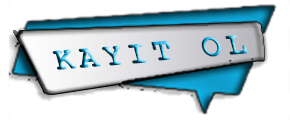
<style>
.page{position:relative;width:290px;height:120px;background:#ffffff}
.page>*{position:absolute;margin:0}
.t1{font:33px "CourierNewPS-BoldMT";letter-spacing:0.16em}
</style>
<div class="page">
<p class="t1" style="left:52px;top:35px;width:196px;height:35px;rotate:-5deg">KAYIT OL</p>
</div>
